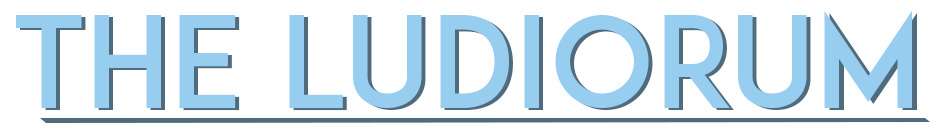
<style>
.page{position:relative;width:940px;height:132px;background:#ffffff}
.page>*{position:absolute;margin:0}
.t1{font:125px "ADAM.CGPRO";color:#97cef0}
</style>
<div class="page">
<p class="t1" style="left:16px;top:10px;width:896px;height:99px">the ludiorum</p>
<p class="t1" style="left:20px;top:12px;width:897px;height:99px">THE LUDIORUM</p>
</div>
